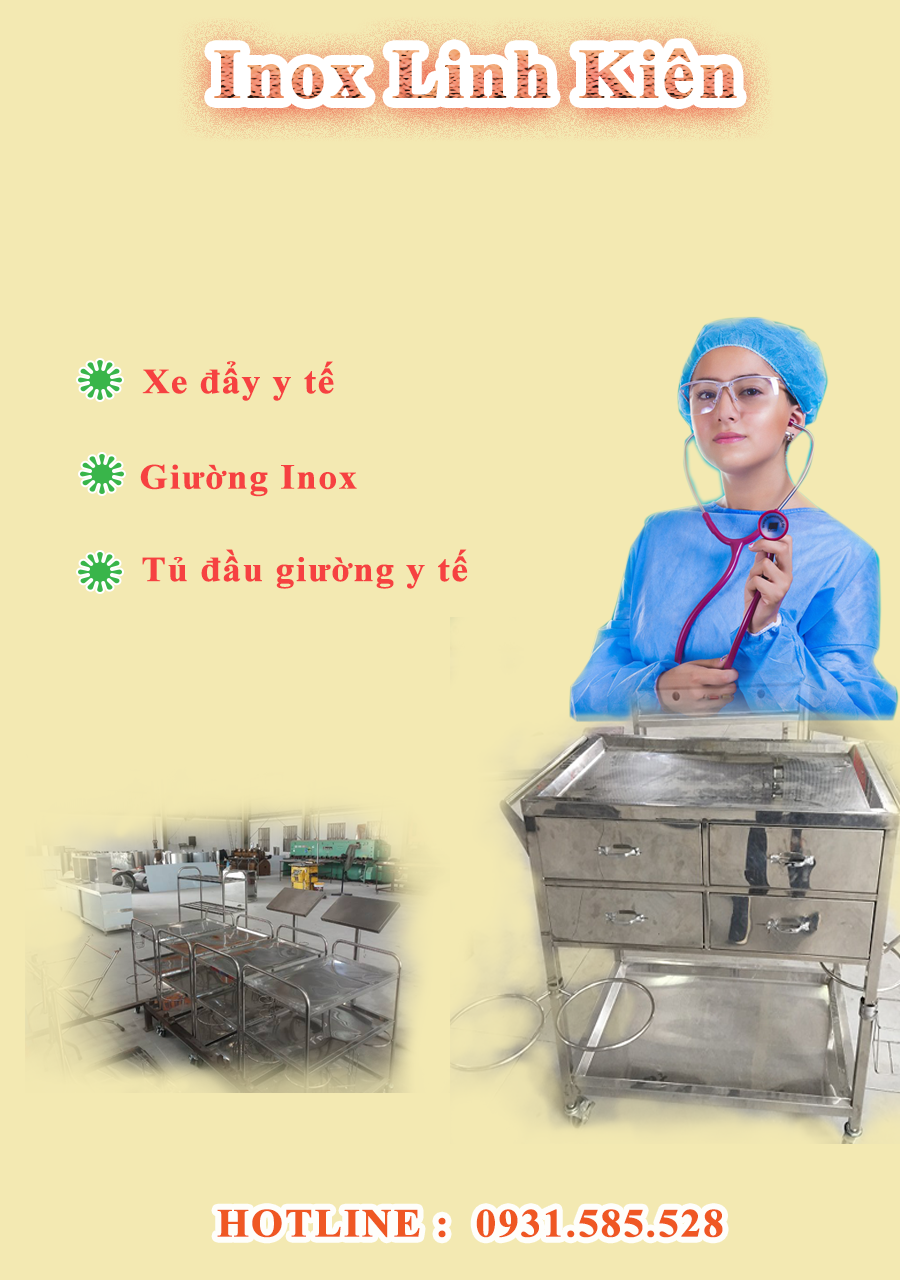
<style>
.page{position:relative;width:900px;height:1280px;background:#f3e9b2}
.page>*{position:absolute;margin:0}
.t1{font:70.7px "TimesNewRomanPS-BoldMT";letter-spacing:0.02em;font-weight:bold;scale:1.04 1}
.t2{font:35.3px "TimesNewRomanPS-BoldMT";letter-spacing:0.02em;color:#f64141;font-weight:bold;scale:1.04 1}
.t3{font:39.8px "TimesNewRomanPS-BoldMT";letter-spacing:0.02em;color:#ef4a11;text-transform:uppercase;font-weight:bold;scale:1.04 1}
</style>
<div class="page">
<p class="t1" style="left:214px;top:48px;width:523px;height:51px">Inox Linh Kiên</p>
<p class="t2" style="left:142px;top:361px;width:192px;height:40px">Xe đẩy y tế</p>
<p class="t2" style="left:140px;top:464px;width:217px;height:33px">Giường Inox</p>
<p class="t2" style="left:142px;top:549px;width:326px;height:40px">Tủ đầu giường y tế</p>
<p class="t3" style="left:217px;top:1209px;width:506px;height:29px;opacity:0.94">Hotline :  0931.585.528</p>
</div>
